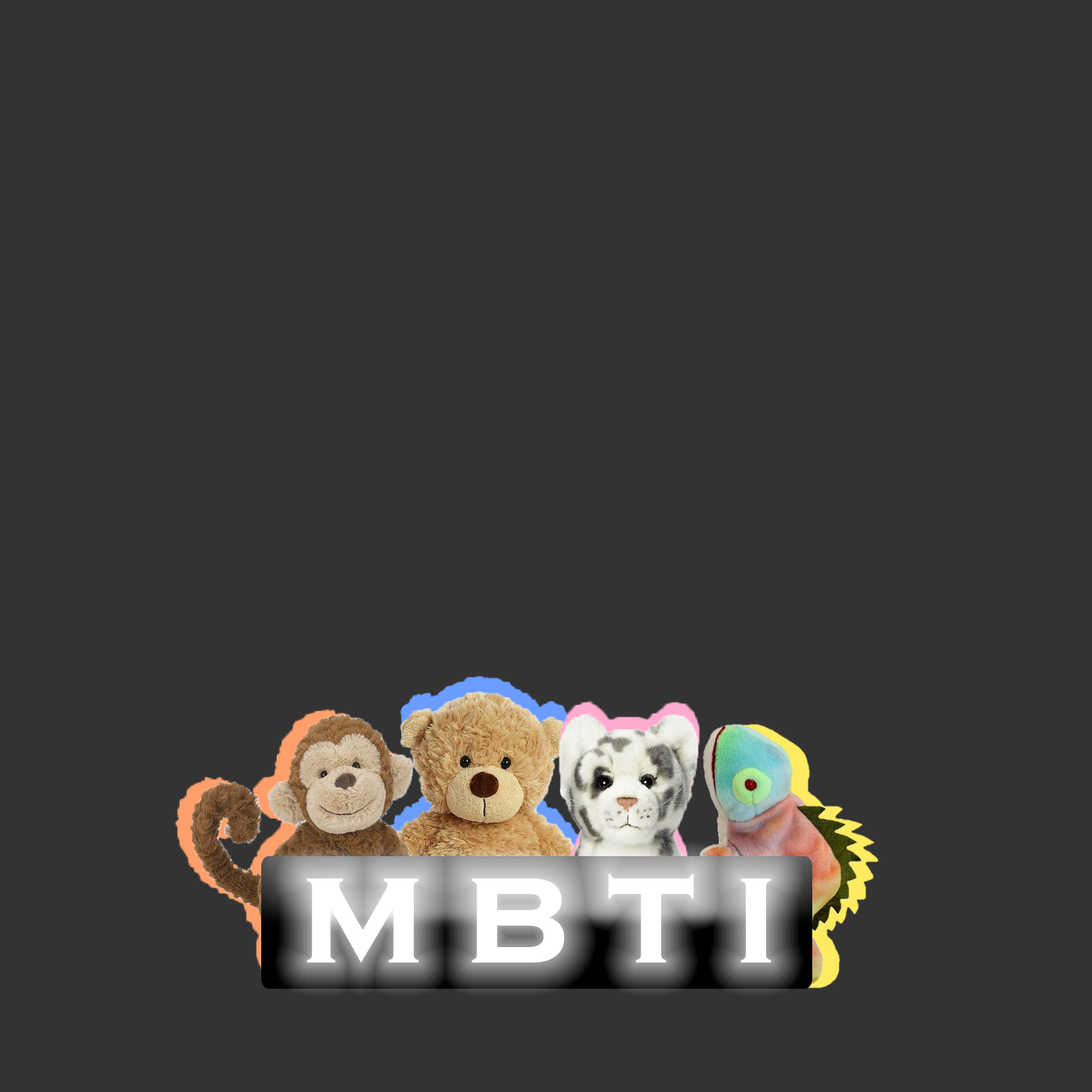
<style>
.page{position:relative;width:1092px;height:1092px;background:#333333}
.page>*{position:absolute;margin:0}
.t1{font:154.1px "CopperplateGothic-Bold";color:#ffffff}
</style>
<div class="page">
<p class="t1" style="left:307px;top:874px;width:464px;height:89px">m b t i</p>
</div>
